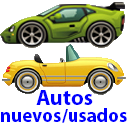
<style>
.page{position:relative;width:128px;height:128px;background:#ffffff}
.page>*{position:absolute;margin:0}
.t1{font:22px "MyriadPro-Bold";color:#0000ff}
.t2{font:19px "MyriadPro-Bold";color:#0000ff}
</style>
<div class="page">
<p class="t1" style="left:36px;top:90px;width:57px;height:15px">Autos</p>
<p class="t2" style="left:1px;top:108px;width:126px;height:15px">nuevos/usados</p>
</div>
